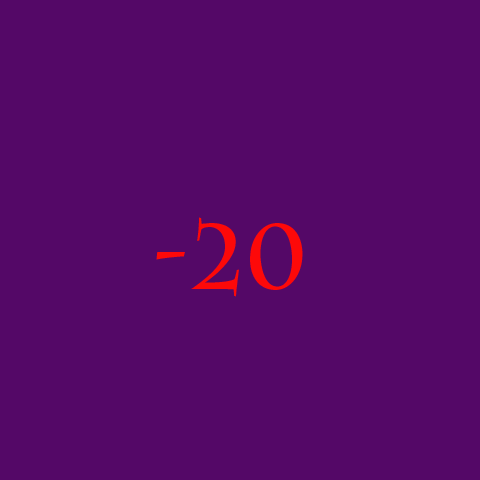
<style>
.page{position:relative;width:480px;height:480px;background:#540867}
.page>*{position:absolute;margin:0}
.t1{font:92.2px "CharlemagneStd-Bold";color:#fd0909}
</style>
<div class="page">
<p class="t1" style="left:156px;top:217px;width:147px;height:80px">-20</p>
</div>
